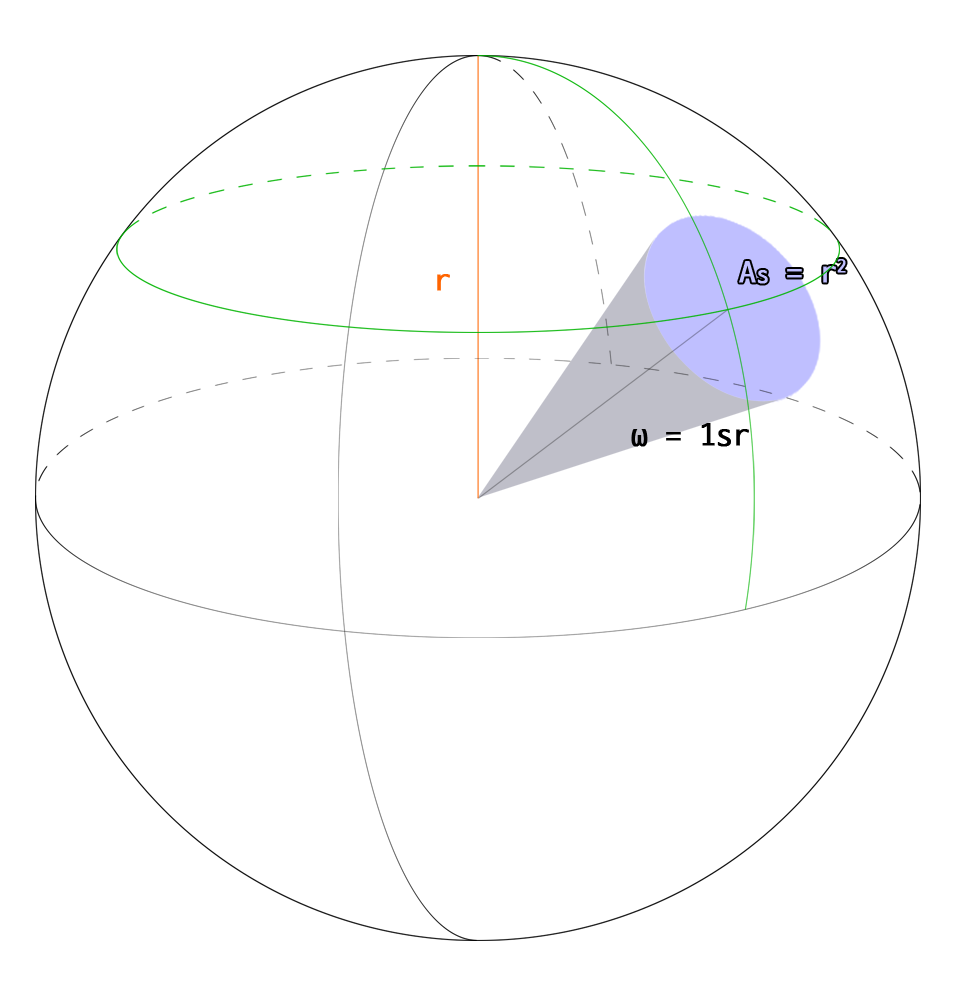
<style>
.page{position:relative;width:962px;height:1002px;background:#ffffff}
.page>*{position:absolute;margin:0}
.t1{font:32px "D2Coding";color:#ff6400;font-weight:bold}
.t2{font:32px "D2Coding";color:#000000;font-weight:bold}
</style>
<div class="page">
<p class="t1" style="left:437px;top:274px;width:13px;height:17px">r</p>
<p class="t2" style="left:631px;top:423px;width:118px;height:24px">ω = 1sr</p>
</div>
